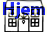
<style>
.page{position:relative;width:47px;height:32px;background:#ffffff}
.page>*{position:absolute;margin:0}
.t1{font:18px "MyriadPro-Black"}
</style>
<div class="page">
<p class="t1" style="left:3px;top:2px;width:42px;height:17px">Hjem</p>
</div>
